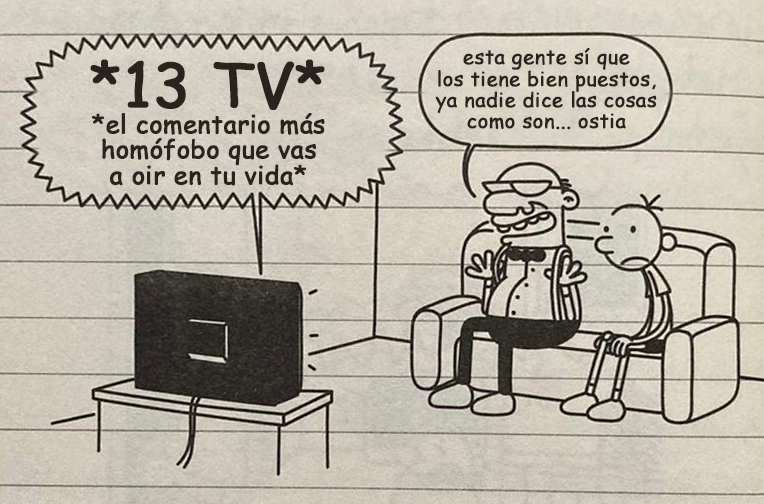
<style>
.page{position:relative;width:764px;height:504px}
.page>*{position:absolute;margin:0}
.t1{font:20.1px "ComicSansMS";color:#28231d;font-weight:bold}
.t2{font:25px "ComicSansMS";color:#28231d;font-weight:bold}
.t3{font:60.9px "ComicSansMS";color:#28231d;font-weight:bold}
</style>
<div class="page">
<p class="t1" style="left:435px;top:48px;width:222px;height:82px;text-align:center">esta gente sí que<br>los tiene bien puestos,<br>ya nadie dice las cosas<br>como son... ostia</p>
<p class="t2" style="left:90px;top:59px;width:235px;height:127px;text-align:center"><span class="t3">*13 TV*<br></span>*el comentario más<br>homófobo que vas<br>a oir en tu vida*</p>
</div>
